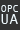
<style>
.page{position:relative;width:20px;height:30px;background:#333333}
.page>*{position:absolute;margin:0}
.t1{font:10px "AndaleMono";color:#edf7fc}
.t2{font:15px "AndaleMono";color:#edf7fc}
</style>
<div class="page">
<p class="t1" style="left:1px;top:5px;width:17px;height:7px">OPC</p>
<p class="t2" style="left:1px;top:14px;width:17px;height:10px">UA</p>
</div>
